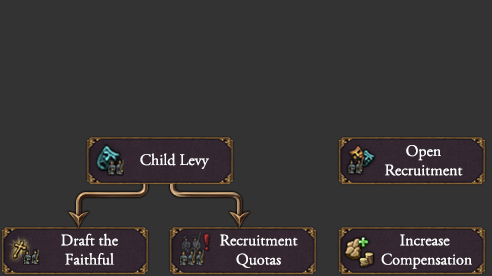
<style>
.page{position:relative;width:492px;height:276px;background:#333333}
.page>*{position:absolute;margin:0}
.t1{font:16px "AGaramondPro-Regular";color:#ffffff}
</style>
<div class="page">
<p class="t1" style="left:385px;top:145px;width:78px;height:31px;text-align:center">Open<br>Recruitment</p>
<p class="t1" style="left:140px;top:153px;width:69px;height:16px">Child Levy</p>
<p class="t1" style="left:61px;top:233px;width:57px;height:32px;text-align:center">Draft the<br>Faithful</p>
<p class="t1" style="left:220px;top:234px;width:78px;height:34px;text-align:center">Recruitment<br>Quotas</p>
<p class="t1" style="left:381px;top:234px;width:91px;height:35px;text-align:center">Increase <br>Compensation</p>
</div>
